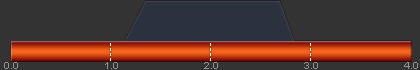
<style>
.page{position:relative;width:420px;height:70px;background:#333333}
.page>*{position:absolute;margin:0}
.t1{font:10px "ArialMT";color:#939393}
</style>
<div class="page">
<p class="t1" style="left:4px;top:62px;width:14px;height:7px">0.0</p>
<p class="t1" style="left:105px;top:62px;width:13px;height:7px">1.0</p>
<p class="t1" style="left:204px;top:62px;width:14px;height:7px">2.0</p>
<p class="t1" style="left:304px;top:62px;width:14px;height:7px">3.0</p>
<p class="t1" style="left:404px;top:62px;width:14px;height:7px">4.0</p>
</div>
